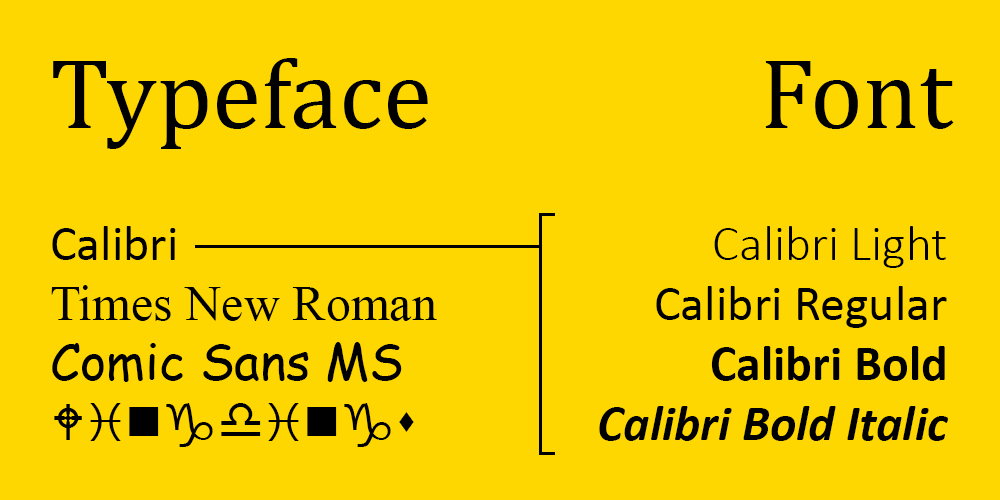
<style>
.page{position:relative;width:1000px;height:500px;background:#ffd700}
.page>*{position:absolute;margin:0}
.t1{font:100px "Cambria";color:#000000}
.t2{font:50px "TimesNewRomanPSMT";color:#000000}
.t3{font:50px "Calibri";color:#000000}
.t4{font:50px "ComicSansMS";color:#000000}
.t5{font:50px "Wingdings-Regular";color:#000000}
.t6{font:50px "Calibri-BoldItalic";color:#000000}
.t7{font:50px "Calibri-Light";color:#000000}
.t8{font:50px "Calibri-Bold";color:#000000}
</style>
<div class="page">
<p class="t1" style="left:53px;top:58px;width:375px;height:91px">Typeface</p>
<p class="t1" style="left:765px;top:61px;width:189px;height:68px">Font</p>
<p class="t2" style="left:51px;top:226px;width:386px;height:221px"><span class="t3">Calibri<br></span>Times New Roman<br><span class="t4">Comic Sans MS<br></span><span class="t5">Wingdings</span></p>
<p class="t6" style="left:599px;top:226px;width:349px;height:215px;text-align:right"><span class="t7">Calibri Light<br></span><span class="t3">Calibri Regular<br></span><span class="t8">Calibri Bold<br></span>Calibri Bold Italic</p>
</div>
